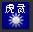
<style>
.page{position:relative;width:33px;height:32px;background:#000090}
.page>*{position:absolute;margin:0}
.t1{font:10.4px "SimSun";color:#ffffff}
</style>
<div class="page">
<p class="t1" style="left:5px;top:4px;width:20px;height:9px">虎贲</p>
</div>
